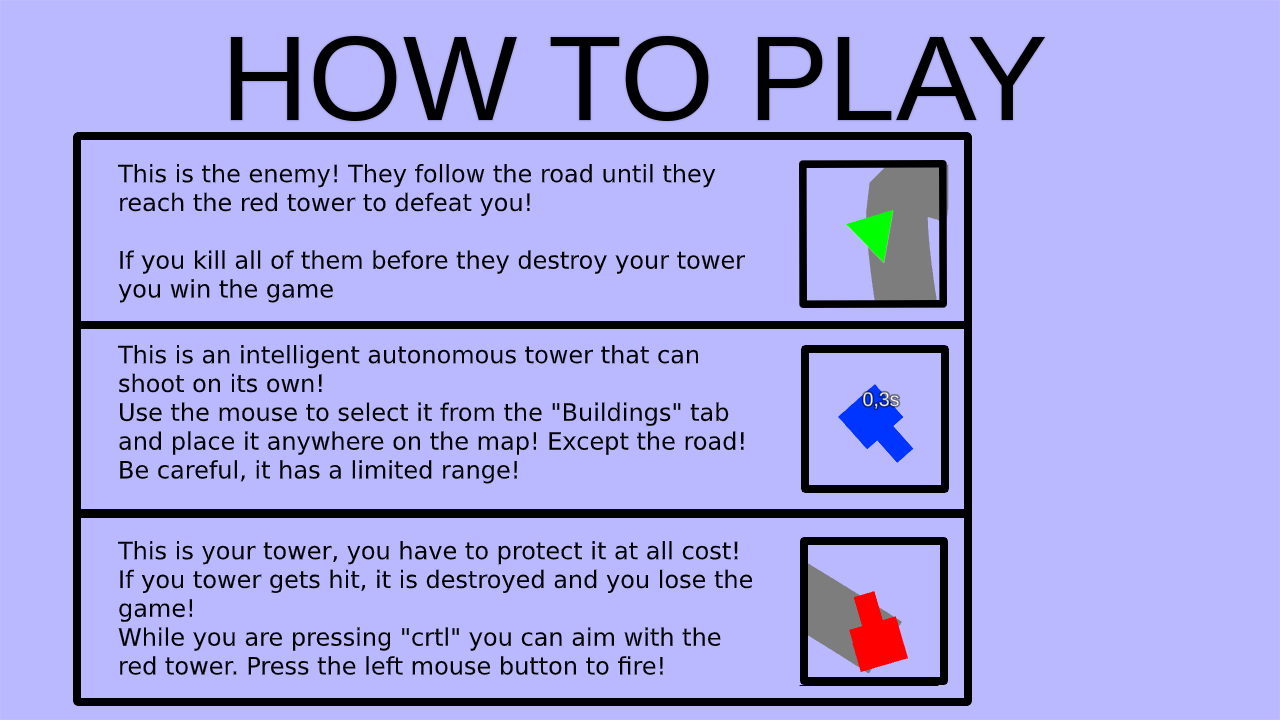
<style>
.page{position:relative;width:1280px;height:720px;background:#bab8ff}
.page>*{position:absolute;margin:0}
.t1{font:24px "DejaVuSans";color:#000000}
</style>
<div class="page">
<p class="t1" style="left:117px;top:164px;width:629px;height:139px">This is the enemy! They follow the road until they reach the red tower to defeat you!<br><br>If you kill all of them before they destroy your tower you win the game</p>
<p class="t1" style="left:117px;top:345px;width:627px;height:139px">This is an intelligent autonomous tower that can shoot on its own!<br>Use the mouse to select it from the "Buildings" tab <br>and place it anywhere on the map! Except the road!<br>Be careful, it has a limited range!</p>
<p class="t1" style="left:117px;top:541px;width:636px;height:134px">This is your tower, you have to protect it at all cost! If you tower gets hit, it is destroyed and you lose the game!<br>While you are pressing "crtl" you can aim with the red tower. Press the left mouse button to fire!</p>
</div>
